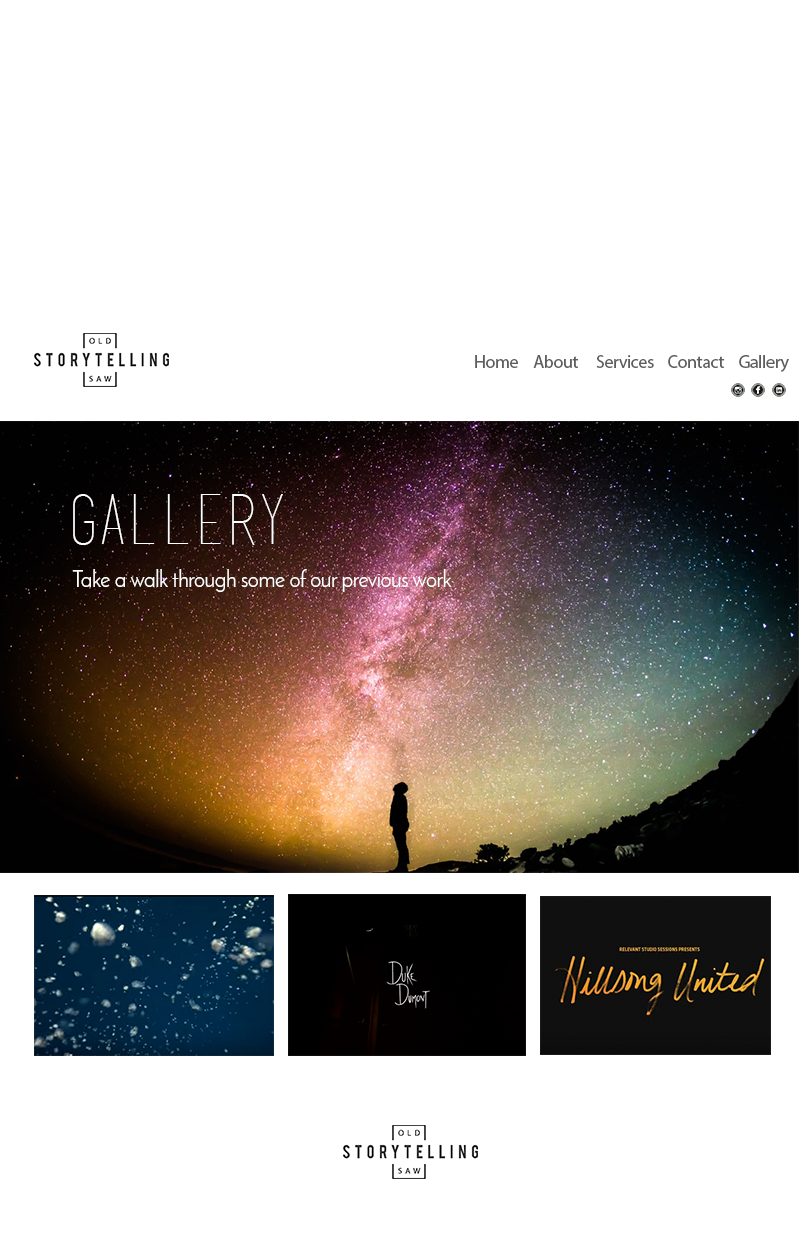
<style>
.page{position:relative;width:800px;height:1248px;background:#ffffff}
.page>*{position:absolute;margin:0}
.t1{font:18px "MyriadPro-Regular";letter-spacing:-0.025em;color:#5f5d5d}
.t2{font:68.7px "basictitlefont";letter-spacing:-0.025em;color:#ffffff}
.t3{font:24.2px "JosefinSans";letter-spacing:-0.025em;color:#ffffff;scale:0.92 1}
</style>
<div class="page">
<p class="t1" style="left:475px;top:355px;width:43px;height:13px">Home</p>
<p class="t1" style="left:533px;top:355px;width:46px;height:13px">About</p>
<p class="t1" style="left:596px;top:355px;width:58px;height:13px">Services</p>
<p class="t1" style="left:668px;top:355px;width:57px;height:13px">Contact</p>
<p class="t1" style="left:739px;top:355px;width:50px;height:17px">Gallery</p>
<p class="t2" style="left:73px;top:494px;width:210px;height:51px">GALLERY</p>
<p class="t3" style="left:72px;top:569px;width:380px;height:23px">Take a walk through some of our previous work</p>
</div>
